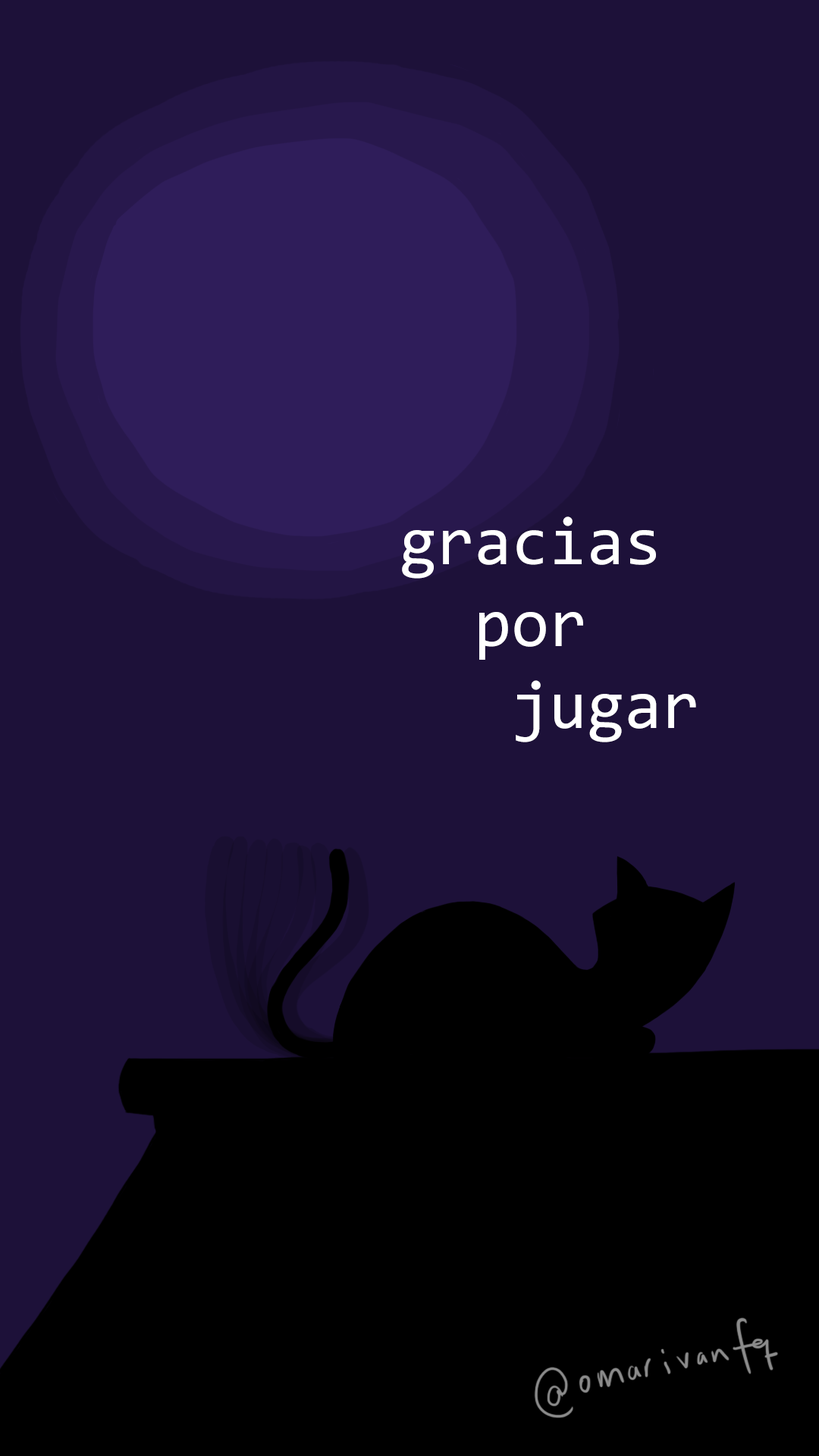
<style>
.page{position:relative;width:819px;height:1456px;background:#1d1139}
.page>*{position:absolute;margin:0}
.t1{font:68.2px "Consolas";color:#ffffff}
</style>
<div class="page">
<p class="t1" style="left:402px;top:516px;width:294px;height:226px;text-align:center">gracias <br>por <br>   jugar</p>
</div>
